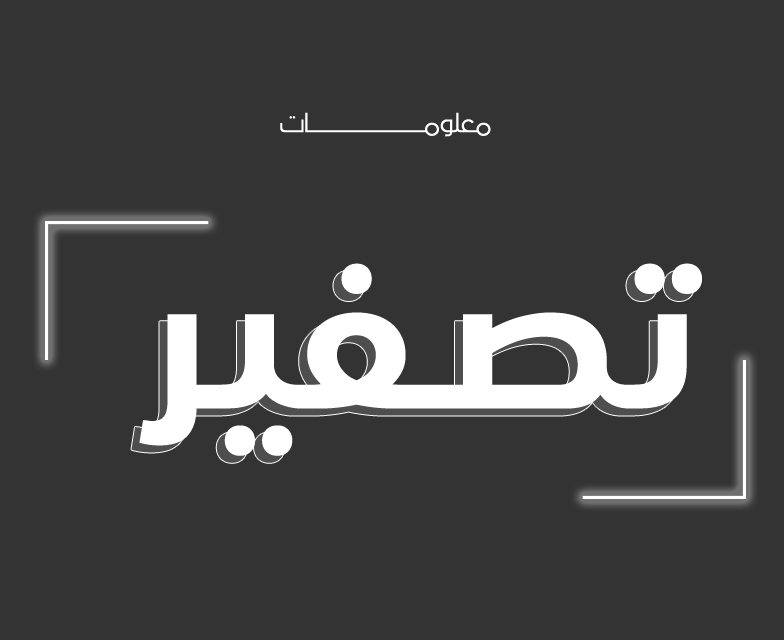
<style>
.page{position:relative;width:784px;height:640px;background:#333333}
.page>*{position:absolute;margin:0}
.t1{font:35.3px "AraHamahSahetAlAssi-Regular";color:#ffffff}
.t2{font:210.7px "SSTArabic-Bold";color:#ffffff}
</style>
<div class="page">
<p class="t1" style="left:280px;top:112px;width:211px;height:25px">معلومـــــــــــــــــات</p>
<p class="t2" style="left:131px;top:270px;width:563px;height:193px">تصـفير</p>
<p class="t2" style="left:139px;top:263px;width:563px;height:193px">تصـفير</p>
</div>
